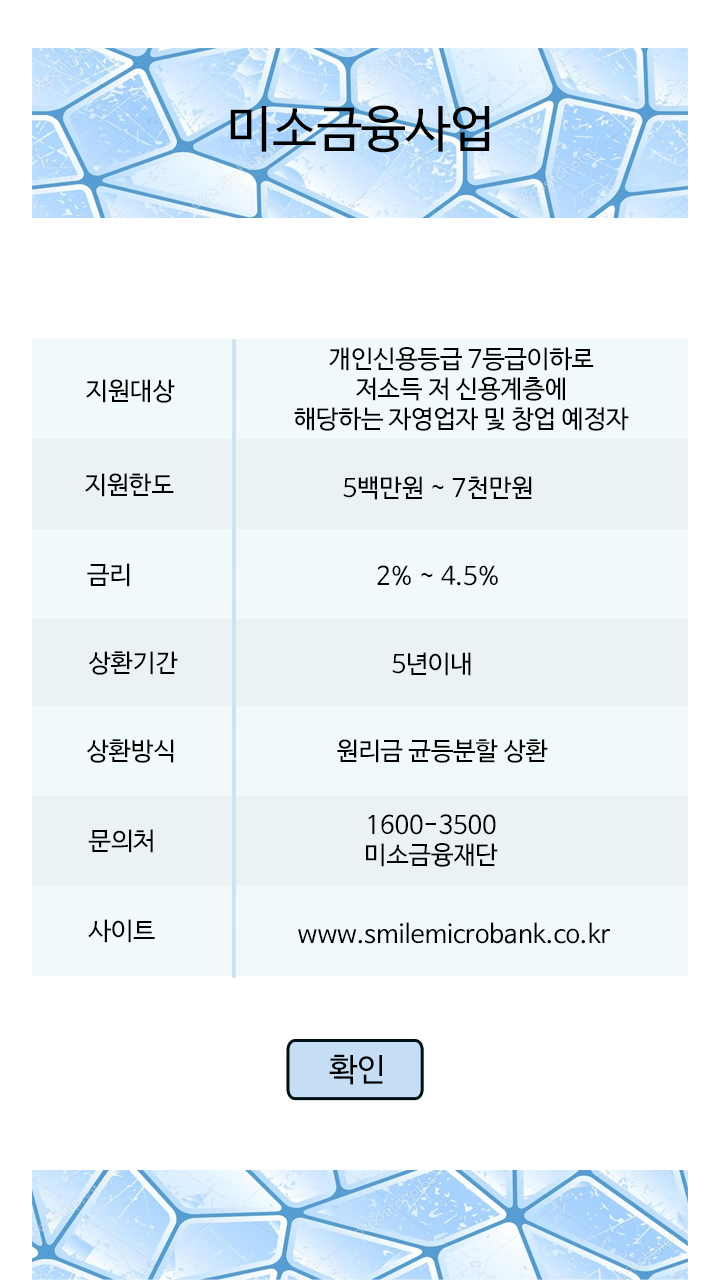
<style>
.page{position:relative;width:720px;height:1280px;background:#ffffff}
.page>*{position:absolute;margin:0}
.t1{font:50px "NanumBarunGothic";color:#000000}
.t2{font:25px/30px "NanumBarunGothic";color:#000000}
.t3{font:25px "NanumBarunGothic";color:#000000}
.t4{font:32px "NanumBarunGothic";color:#000000}
</style>
<div class="page">
<p class="t1" style="left:230px;top:105px;width:260px;height:48px">미소금융사업</p>
<p class="t2" style="left:294px;top:347px;width:335px;height:84px;text-align:center">개인신용등급 7등급이하로 <br>저소득 저 신용계층에 <br>해당하는 자영업자 및 창업 예정자</p>
<p class="t3" style="left:86px;top:379px;width:89px;height:24px">지원대상</p>
<p class="t3" style="left:85px;top:473px;width:89px;height:24px">지원한도</p>
<p class="t3" style="left:343px;top:476px;width:189px;height:24px">5백만원 ~ 7천만원</p>
<p class="t3" style="left:87px;top:563px;width:43px;height:24px">금리</p>
<p class="t3" style="left:377px;top:565px;width:121px;height:21px">2% ~ 4.5%</p>
<p class="t3" style="left:88px;top:651px;width:90px;height:24px">상환기간</p>
<p class="t3" style="left:392px;top:652px;width:79px;height:24px">5년이내</p>
<p class="t3" style="left:86px;top:739px;width:88px;height:24px">상환방식</p>
<p class="t3" style="left:337px;top:739px;width:211px;height:24px">원리금 균등분할 상환</p>
<p class="t2" style="left:366px;top:814px;width:132px;height:53px;text-align:center">1600-3500<br>미소금융재단</p>
<p class="t3" style="left:88px;top:829px;width:65px;height:24px">문의처</p>
<p class="t3" style="left:88px;top:919px;width:67px;height:24px">사이트</p>
<p class="t3" style="left:298px;top:922px;width:312px;height:22px">www.smilemicrobank.co.kr</p>
<p class="t4" style="left:329px;top:1054px;width:54px;height:31px">확인</p>
</div>
